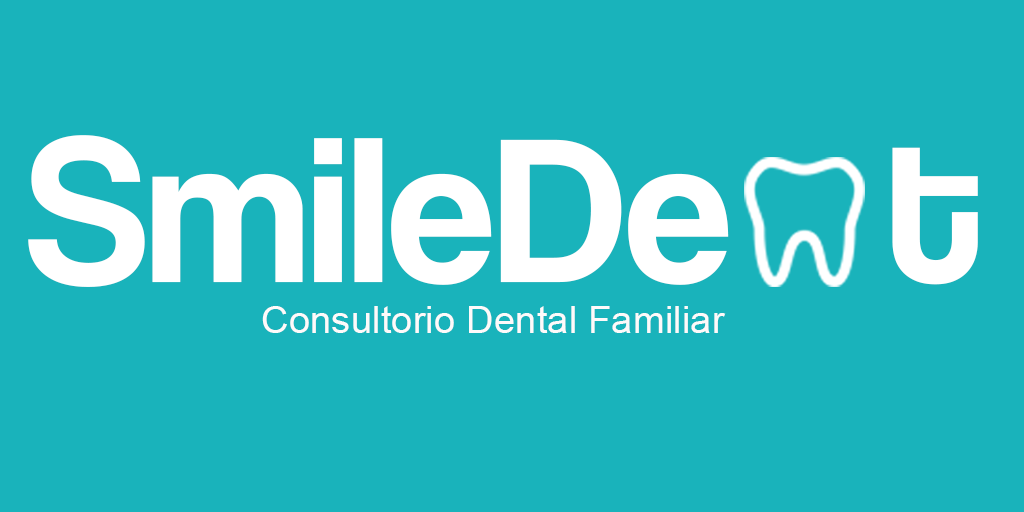
<style>
.page{position:relative;width:1024px;height:512px;background:#19b3bb}
.page>*{position:absolute;margin:0}
.t1{font:213.8px "CoolveticaRg-Regular";color:#ffffff}
.t2{font:38.4px "ArialMT";color:#fefafa}
</style>
<div class="page">
<p class="t1" style="left:28px;top:135px;width:950px;height:152px">SmileDe   t</p>
<p class="t2" style="left:262px;top:306px;width:464px;height:27px">Consultorio Dental Familiar</p>
</div>
